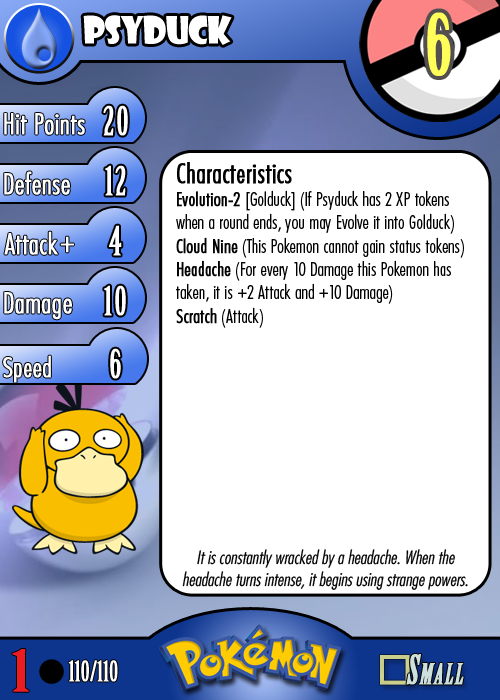
<style>
.page{position:relative;width:500px;height:700px;background:#ffffff}
.page>*{position:absolute;margin:0}
.t1{font:36.7px "ShowcardGothic-Reg";letter-spacing:-0.025em;color:#ffffff;scale:0.91 1}
.t2{font:83.3px "BirchStd";letter-spacing:0.025em;color:#fffd59;font-weight:bold}
.t3{font:27.8px "Futura-CondensedLight";color:#ffffff;font-weight:bold}
.t4{font:38.9px "BirchStd";letter-spacing:0.035em;color:#ffffff;font-weight:bold}
.t5{font:19.4px "FuturaCondensedBQ-Light";color:#010101}
.t6{font:27.8px "FuturaCondensedBQ-Light";color:#010101;font-weight:bold}
.t7{font:19.4px "FuturaCondensedBQ-Light";color:#010101;font-weight:bold}
.t8{font:30.6px "Futura-CondensedLight";color:#ffffff;font-weight:bold}
.t9{font:27.8px "FuturaCondensedBQ-Light";color:#ffffff;font-weight:bold}
.t10{font:18.1px "Futura-CondensedLight";color:#010101;font-style:italic}
.t11{font:55.6px "BirchStd";color:#ed1c24;font-weight:bold;scale:1.5 1}
.t12{font:27.8px "BirchStd";color:#ffffff;font-weight:bold}
</style>
<div class="page">
<p class="t1" style="left:83px;top:15px;width:149px;height:30px">psyduck</p>
<p class="t2" style="left:427px;top:12px;width:24px;height:64px">6</p>
<p class="t3" style="left:4px;top:113px;width:81px;height:22px">Hit Points</p>
<p class="t4" style="left:103px;top:105px;width:25px;height:31px">20</p>
<p class="t3" style="left:4px;top:171px;width:66px;height:24px">Defense</p>
<p class="t4" style="left:105px;top:165px;width:21px;height:31px">12</p>
<p class="t5" style="left:176px;top:162px;width:288px;height:166px"><span class="t6">Characteristics<br></span><span class="t7">Evolution-2 </span>[Golduck] (If Psyduck has 2 XP tokens when a round ends, you may Evolve it into Golduck)<br><span class="t7">Cloud Nine</span> (This Pokemon cannot gain status tokens)<br><span class="t7">Headache</span> (For every 10 Damage this Pokemon has taken, it is +2 Attack and +10 Damage)<br><span class="t7">Scratch</span> (Attack)</p>
<p class="t3" style="left:4px;top:231px;width:54px;height:24px">Attack</p>
<p class="t4" style="left:109px;top:225px;width:13px;height:31px">4</p>
<p class="t8" style="left:60px;top:236px;width:14px;height:17px">+</p>
<p class="t3" style="left:4px;top:292px;width:68px;height:28px">Damage</p>
<p class="t4" style="left:104px;top:285px;width:22px;height:31px">10</p>
<p class="t4" style="left:110px;top:348px;width:11px;height:31px">6</p>
<p class="t9" style="left:3px;top:355px;width:48px;height:28px">Speed</p>
<p class="t10" style="left:182px;top:549px;width:286px;height:41px;text-align:center">It is constantly wracked by a headache. When the headache turns intense, it begins using strange powers.</p>
<p class="t11" style="left:12px;top:649px;width:17px;height:43px">1</p>
<p class="t12" style="left:68px;top:660px;width:50px;height:22px">110/110</p>
</div>
